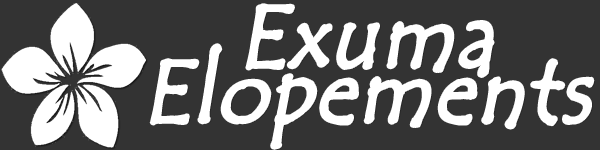
<style>
.page{position:relative;width:600px;height:150px;background:#333333}
.page>*{position:absolute;margin:0}
.t1{font:90px/55px "TempusSansITC";letter-spacing:0.01em;color:#ffffff;font-weight:bold;font-style:italic;scale:0.94 1}
</style>
<div class="page">
<p class="t1" style="left:151px;top:5px;width:442px;height:143px;text-align:center">Exuma<br>Elopements</p>
</div>
